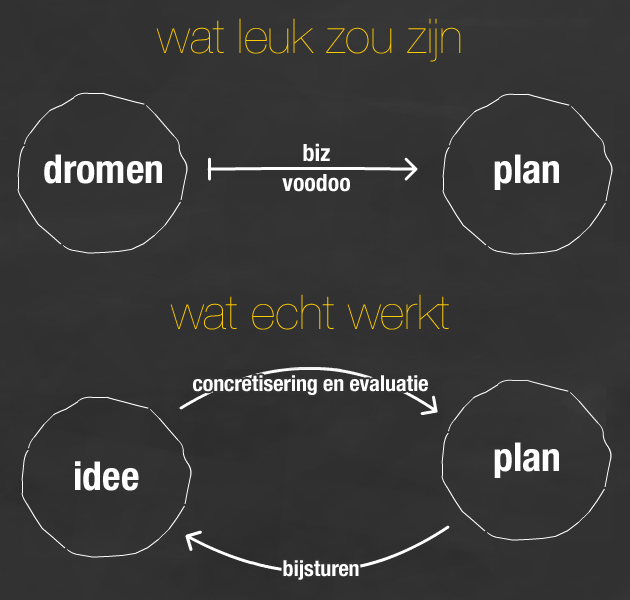
<style>
.page{position:relative;width:630px;height:600px;background:#323232}
.page>*{position:absolute;margin:0}
.t1{font:47.8px "HelveticaNeue-UltraLight";color:#ffcb00}
.t2{font:23.9px/29.9px "HelveticaNeue-CondensedBold";color:#ffffff}
.t3{font:39.9px "HelveticaNeue-CondensedBold";color:#ffffff}
.t4{font:21.9px "HelveticaNeue-CondensedBold";color:#ffffff}
</style>
<div class="page">
<p class="t1" style="left:156px;top:18px;width:305px;height:44px">wat leuk zou zijn</p>
<p class="t2" style="left:282px;top:143px;width:68px;height:49px;text-align:center">biz<br>voodoo</p>
<p class="t3" style="left:44px;top:154px;width:118px;height:30px">dromen</p>
<p class="t3" style="left:494px;top:154px;width:65px;height:36px">plan</p>
<p class="t1" style="left:170px;top:294px;width:279px;height:36px">wat echt werkt</p>
<p class="t4" style="left:193px;top:375px;width:235px;height:20px">concretisering en evaluatie</p>
<p class="t3" style="left:494px;top:442px;width:65px;height:36px">plan</p>
<p class="t3" style="left:75px;top:461px;width:64px;height:30px">idee</p>
<p class="t4" style="left:283px;top:560px;width:76px;height:20px">bijsturen</p>
</div>
